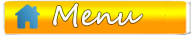
<style>
.page{position:relative;width:191px;height:35px;background:#ff9b02}
.page>*{position:absolute;margin:0}
.t1{font:28px "SegoeScript";color:#ffffff}
</style>
<div class="page">
<p class="t1" style="left:53px;top:3px;width:90px;height:24px">Menu</p>
</div>
